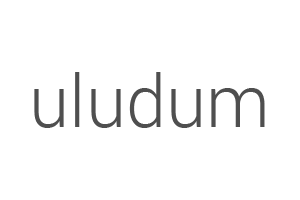
<style>
.page{position:relative;width:300px;height:200px;background:#ffffff}
.page>*{position:absolute;margin:0}
.t1{font:72px "Roboto-Light";color:#4f4f4f}
</style>
<div class="page">
<p class="t1" style="left:34px;top:72px;width:231px;height:56px">uludum</p>
</div>
